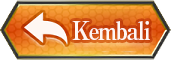
<style>
.page{position:relative;width:171px;height:60px}
.page>*{position:absolute;margin:0}
.t1{font:25px "RyuminPro-ExBold";letter-spacing:-0.08em;color:#fff7f3;scale:0.9 1}
</style>
<div class="page">
<p class="t1" style="left:72px;top:21px;width:78px;height:19px">Kembali</p>
</div>
